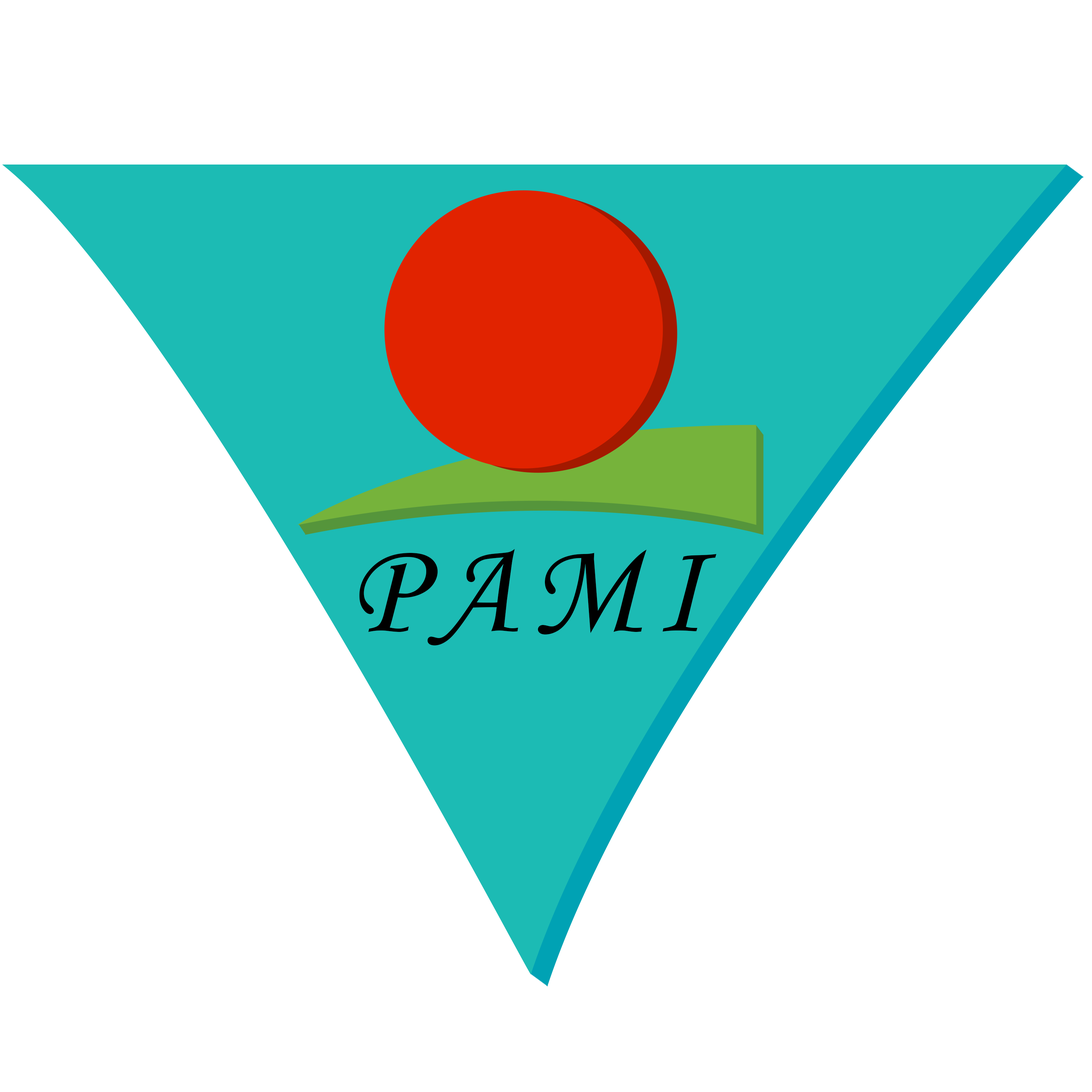
<style>
.page{position:relative;width:1092px;height:1092px;background:#ffffff}
.page>*{position:absolute;margin:0}
.t1{font:132.3px "MonotypeCorsiva";letter-spacing:0.1em;color:#000000}
</style>
<div class="page">
<p class="t1" style="left:359px;top:549px;width:357px;height:96px">PAMI</p>
</div>
